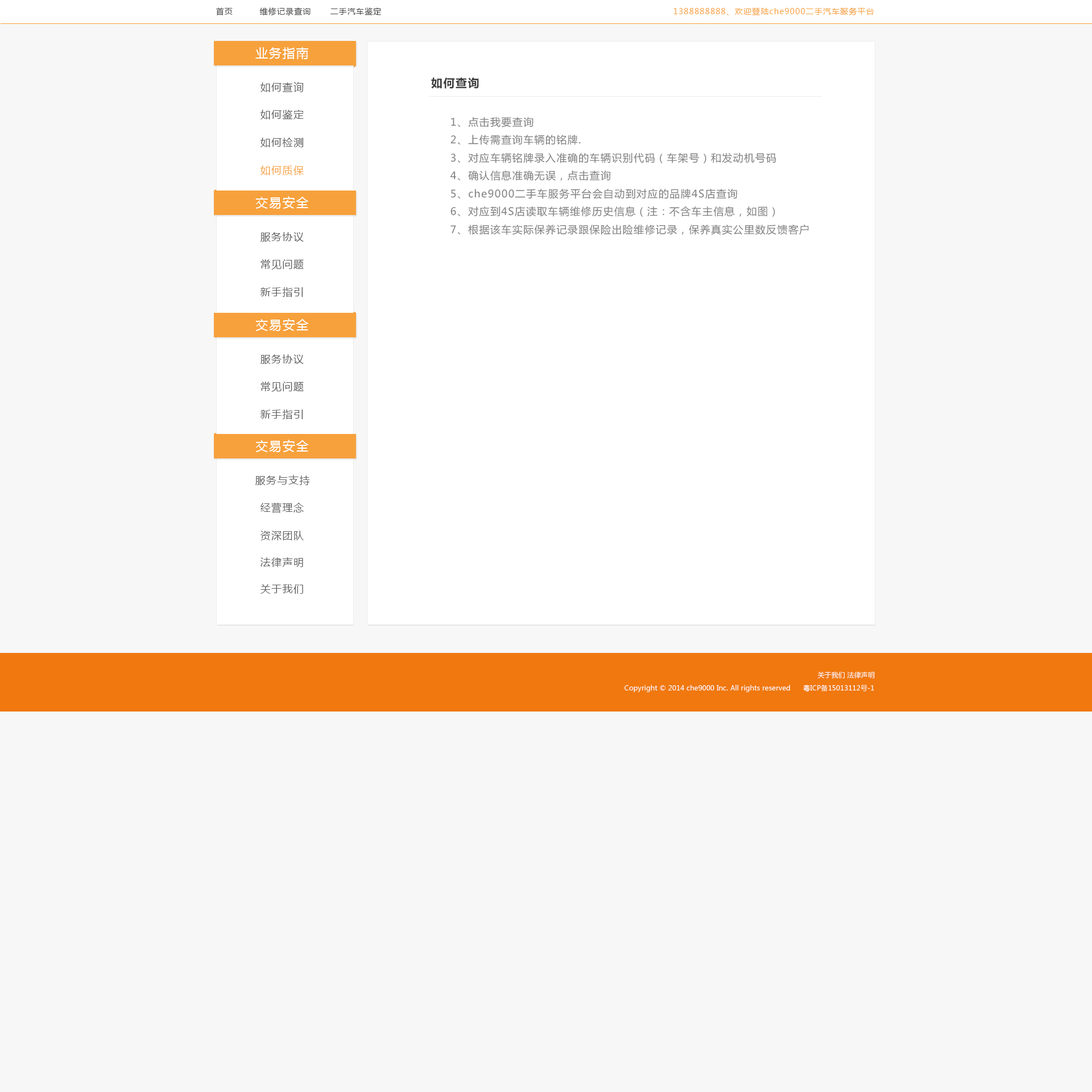
<style>
.page{position:relative;width:1092px;height:1092px;background:#f7f7f7}
.page>*{position:absolute;margin:0}
.t1{font:8px "MicrosoftYaHei";letter-spacing:0.08em;color:#494949}
.t2{font:8px "MicrosoftYaHei";letter-spacing:0.08em;color:#f7a13c}
.t3{font:12.5px "MicrosoftYaHei";letter-spacing:0.08em;color:#ffffff}
.t4{font:10.2px "MicrosoftYaHei";letter-spacing:0.08em;color:#808080}
.t5{font:11.4px "MicrosoftYaHei-Bold";letter-spacing:0.08em;color:#3c3c3c}
.t6{font:10.2px "MicrosoftYaHei";letter-spacing:0.08em;color:#606060}
.t7{font:10.2px "MicrosoftYaHei";letter-spacing:0.08em;color:#f7a13c}
.t8{font:6.8px "MicrosoftYaHei";letter-spacing:0.01em;color:#ffffff}
</style>
<div class="page">
<p class="t1" style="left:216px;top:7px;width:17px;height:8px">首页</p>
<p class="t1" style="left:259px;top:7px;width:52px;height:9px">维修记录查询</p>
<p class="t1" style="left:330px;top:7px;width:51px;height:8px">二手汽车鉴定</p>
<p class="t2" style="left:673px;top:7px;width:201px;height:8px">1388888888、欢迎登陆che9000二手汽车服务平台</p>
<p class="t3" style="left:255px;top:47px;width:53px;height:12px">业务指南</p>
<p class="t4" style="left:431px;top:77px;width:378px;height:158px"><span class="t5">如何查询<br><br>     </span>1、点击我要查询<br>     2、上传需查询车辆的铭牌.<br>     3、对应车辆铭牌录入准确的车辆识别代码（车架号）和发动机号码<br>     4、确认信息准确无误，点击查询<br>     5、che9000二手车服务平台会自动到对应的品牌4S店查询<br>     6、对应到4S店读取车辆维修历史信息（注：不含车主信息，如图）<br>     7、根据该车实际保养记录跟保险出险维修记录，保养真实公里数反馈客户</p>
<p class="t6" style="left:260px;top:82px;width:44px;height:10px">如何查询</p>
<p class="t6" style="left:260px;top:109px;width:44px;height:10px">如何鉴定</p>
<p class="t6" style="left:260px;top:138px;width:44px;height:9px">如何检测</p>
<p class="t7" style="left:260px;top:166px;width:44px;height:9px">如何质保</p>
<p class="t3" style="left:255px;top:196px;width:54px;height:13px">交易安全</p>
<p class="t6" style="left:260px;top:232px;width:44px;height:10px">服务协议</p>
<p class="t6" style="left:260px;top:259px;width:44px;height:11px">常见问题</p>
<p class="t6" style="left:260px;top:287px;width:43px;height:10px">新手指引</p>
<p class="t3" style="left:255px;top:318px;width:54px;height:13px">交易安全</p>
<p class="t6" style="left:260px;top:354px;width:44px;height:10px">服务协议</p>
<p class="t6" style="left:260px;top:382px;width:44px;height:10px">常见问题</p>
<p class="t6" style="left:260px;top:409px;width:43px;height:10px">新手指引</p>
<p class="t3" style="left:255px;top:440px;width:54px;height:12px">交易安全</p>
<p class="t6" style="left:255px;top:475px;width:55px;height:10px">服务与支持</p>
<p class="t6" style="left:260px;top:502px;width:44px;height:11px">经营理念</p>
<p class="t6" style="left:260px;top:531px;width:44px;height:9px">资深团队</p>
<p class="t6" style="left:260px;top:557px;width:43px;height:10px">法律声明</p>
<p class="t6" style="left:260px;top:584px;width:43px;height:10px">关于我们</p>
<p class="t8" style="left:817px;top:672px;width:58px;height:7px">关于我们 法律声明</p>
<p class="t8" style="left:624px;top:684px;width:250px;height:8px">Copyright © 2014 che9000 Inc. All rights reserved      粤ICP备15013112号-1</p>
</div>
